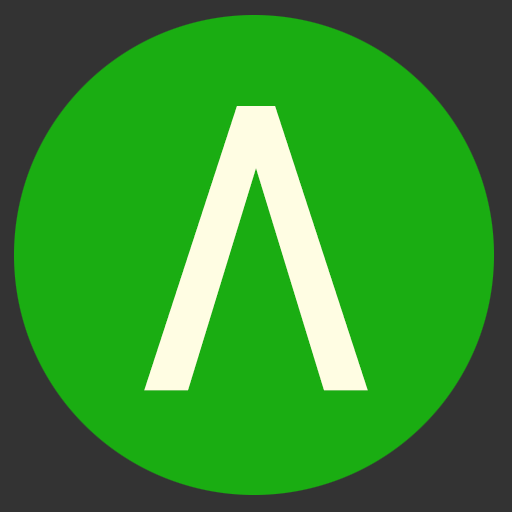
<style>
.page{position:relative;width:512px;height:512px;background:#1aad12}
.page>*{position:absolute;margin:0}
.t1{font:400px "Bahnschrift";color:#fffde3}
</style>
<div class="page">
<p class="t1" style="left:144px;top:106px;width:224px;height:285px;rotate:180deg">V</p>
</div>
